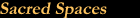
<style>
.page{position:relative;width:140px;height:18px;background:#000000}
.page>*{position:absolute;margin:0}
.t1{font:18px "Garamond-Bold";color:#fec45f;font-style:italic}
</style>
<div class="page">
<p class="t1" style="left:0px;top:2px;width:107px;height:17px">Sacred Spaces</p>
</div>
